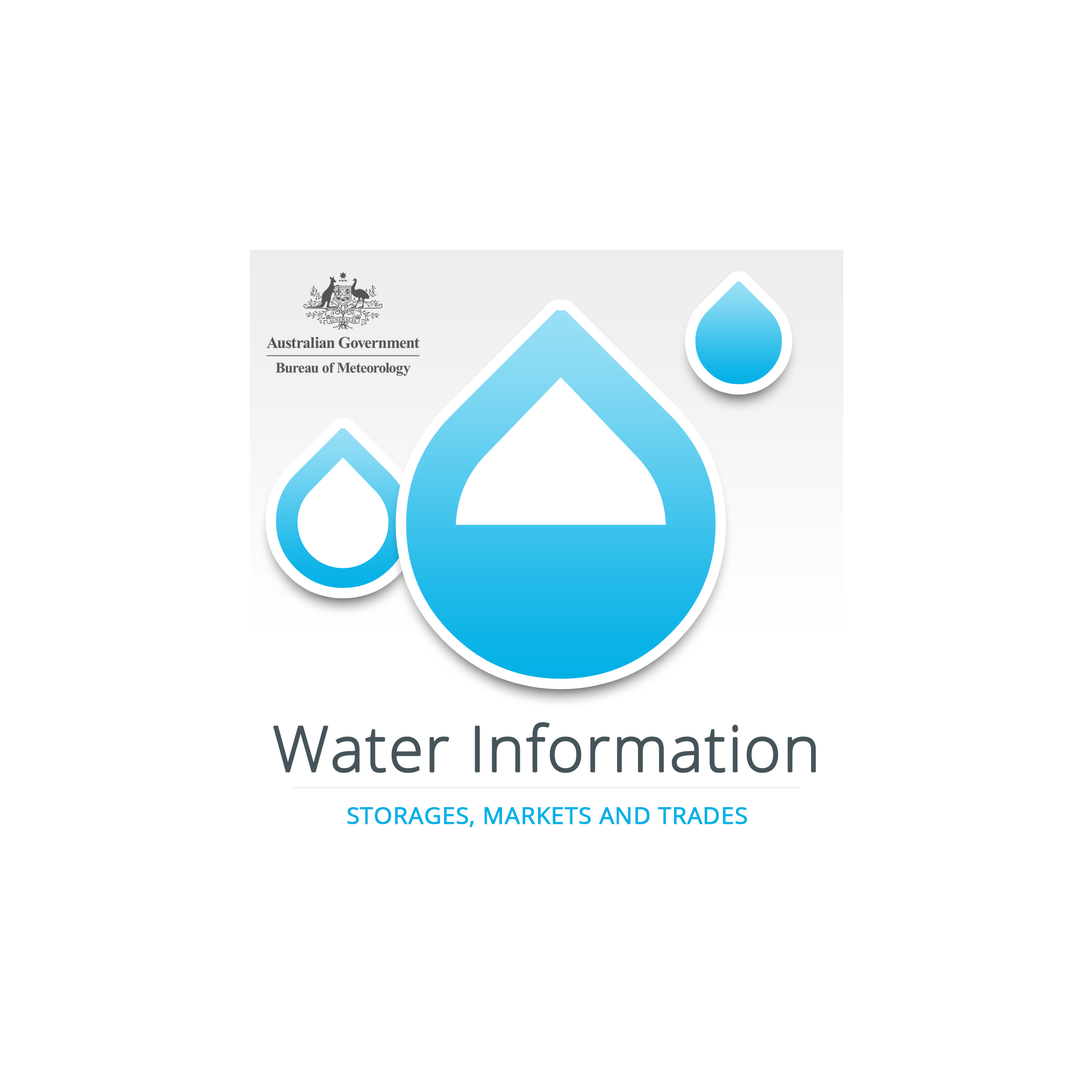
<style>
.page{position:relative;width:1092px;height:1092px;background:#ffffff}
.page>*{position:absolute;margin:0}
.t1{font:63.3px "OpenSans-Light";color:#46545a;font-weight:bold}
.t2{font:23.7px "OpenSans";color:#05b1e6;text-transform:uppercase;font-weight:bold}
</style>
<div class="page">
<p class="t1" style="left:273px;top:722px;width:543px;height:51px">Water Information</p>
<p class="t2" style="left:347px;top:807px;width:400px;height:20px">Storages, Markets and Trades</p>
</div>
